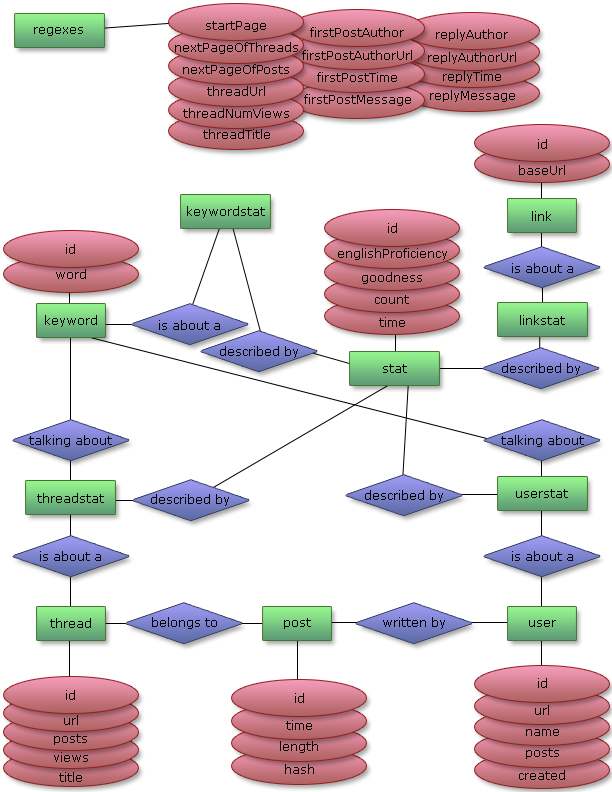
<style>
.page{position:relative;width:612px;height:792px;background:#ffffff}
.page>*{position:absolute;margin:0}
.t1{font:12px "Verdana";color:#000000}
</style>
<div class="page">
<p class="t1" style="left:34px;top:27px;width:49px;height:9px">regexes</p>
<p class="t1" style="left:206px;top:21px;width:60px;height:11px">startPage</p>
<p class="t1" style="left:310px;top:27px;width:94px;height:10px">firstPostAuthor</p>
<p class="t1" style="left:436px;top:29px;width:72px;height:12px">replyAuthor</p>
<p class="t1" style="left:175px;top:42px;width:123px;height:12px">nextPageOfThreads</p>
<p class="t1" style="left:302px;top:50px;width:110px;height:10px">firstPostAuthorUrl</p>
<p class="t1" style="left:428px;top:52px;width:88px;height:12px">replyAuthorUrl</p>
<p class="t1" style="left:183px;top:64px;width:106px;height:12px">nextPageOfPosts</p>
<p class="t1" style="left:317px;top:72px;width:80px;height:10px">firstPostTime</p>
<p class="t1" style="left:443px;top:71px;width:58px;height:12px">replyTime</p>
<p class="t1" style="left:207px;top:86px;width:58px;height:10px">threadUrl</p>
<p class="t1" style="left:304px;top:94px;width:107px;height:12px">firstPostMessage</p>
<p class="t1" style="left:430px;top:90px;width:85px;height:12px">replyMessage</p>
<p class="t1" style="left:183px;top:108px;width:106px;height:10px">threadNumViews</p>
<p class="t1" style="left:203px;top:129px;width:67px;height:10px">threadTitle</p>
<p class="t1" style="left:538px;top:139px;width:9px;height:10px">id</p>
<p class="t1" style="left:519px;top:165px;width:46px;height:10px">baseUrl</p>
<p class="t1" style="left:187px;top:206px;width:78px;height:12px">keywordstat</p>
<p class="t1" style="left:532px;top:211px;width:19px;height:10px">link</p>
<p class="t1" style="left:388px;top:223px;width:9px;height:10px">id</p>
<p class="t1" style="left:66px;top:244px;width:9px;height:10px">id</p>
<p class="t1" style="left:338px;top:248px;width:109px;height:12px">englishProficiency</p>
<p class="t1" style="left:56px;top:269px;width:30px;height:10px">word</p>
<p class="t1" style="left:512px;top:263px;width:61px;height:10px">is about a</p>
<p class="t1" style="left:362px;top:272px;width:60px;height:12px">goodness</p>
<p class="t1" style="left:375px;top:295px;width:34px;height:9px">count</p>
<p class="t1" style="left:45px;top:315px;width:52px;height:12px">keyword</p>
<p class="t1" style="left:379px;top:317px;width:26px;height:10px">time</p>
<p class="t1" style="left:520px;top:315px;width:45px;height:10px">linkstat</p>
<p class="t1" style="left:159px;top:320px;width:61px;height:10px">is about a</p>
<p class="t1" style="left:220px;top:346px;width:78px;height:12px">described by</p>
<p class="t1" style="left:383px;top:364px;width:24px;height:9px">stat</p>
<p class="t1" style="left:502px;top:363px;width:78px;height:12px">described by</p>
<p class="t1" style="left:29px;top:435px;width:83px;height:12px">talking about</p>
<p class="t1" style="left:501px;top:435px;width:83px;height:12px">talking about</p>
<p class="t1" style="left:37px;top:493px;width:67px;height:10px">threadstat</p>
<p class="t1" style="left:151px;top:494px;width:78px;height:12px">described by</p>
<p class="t1" style="left:365px;top:490px;width:78px;height:12px">described by</p>
<p class="t1" style="left:516px;top:489px;width:52px;height:9px">userstat</p>
<p class="t1" style="left:40px;top:551px;width:61px;height:10px">is about a</p>
<p class="t1" style="left:512px;top:551px;width:61px;height:10px">is about a</p>
<p class="t1" style="left:152px;top:617px;width:65px;height:12px">belongs to</p>
<p class="t1" style="left:383px;top:617px;width:62px;height:12px">written by</p>
<p class="t1" style="left:50px;top:618px;width:41px;height:10px">thread</p>
<p class="t1" style="left:284px;top:618px;width:27px;height:11px">post</p>
<p class="t1" style="left:529px;top:620px;width:27px;height:7px">user</p>
<p class="t1" style="left:538px;top:678px;width:9px;height:10px">id</p>
<p class="t1" style="left:66px;top:690px;width:9px;height:10px">id</p>
<p class="t1" style="left:295px;top:693px;width:9px;height:10px">id</p>
<p class="t1" style="left:535px;top:705px;width:14px;height:10px">url</p>
<p class="t1" style="left:64px;top:715px;width:14px;height:10px">url</p>
<p class="t1" style="left:286px;top:720px;width:26px;height:10px">time</p>
<p class="t1" style="left:54px;top:734px;width:33px;height:11px">posts</p>
<p class="t1" style="left:526px;top:729px;width:33px;height:7px">name</p>
<p class="t1" style="left:280px;top:741px;width:38px;height:12px">length</p>
<p class="t1" style="left:526px;top:748px;width:33px;height:11px">posts</p>
<p class="t1" style="left:54px;top:752px;width:34px;height:10px">views</p>
<p class="t1" style="left:59px;top:772px;width:23px;height:10px">title</p>
<p class="t1" style="left:285px;top:764px;width:29px;height:10px">hash</p>
<p class="t1" style="left:519px;top:770px;width:46px;height:10px">created</p>
</div>
